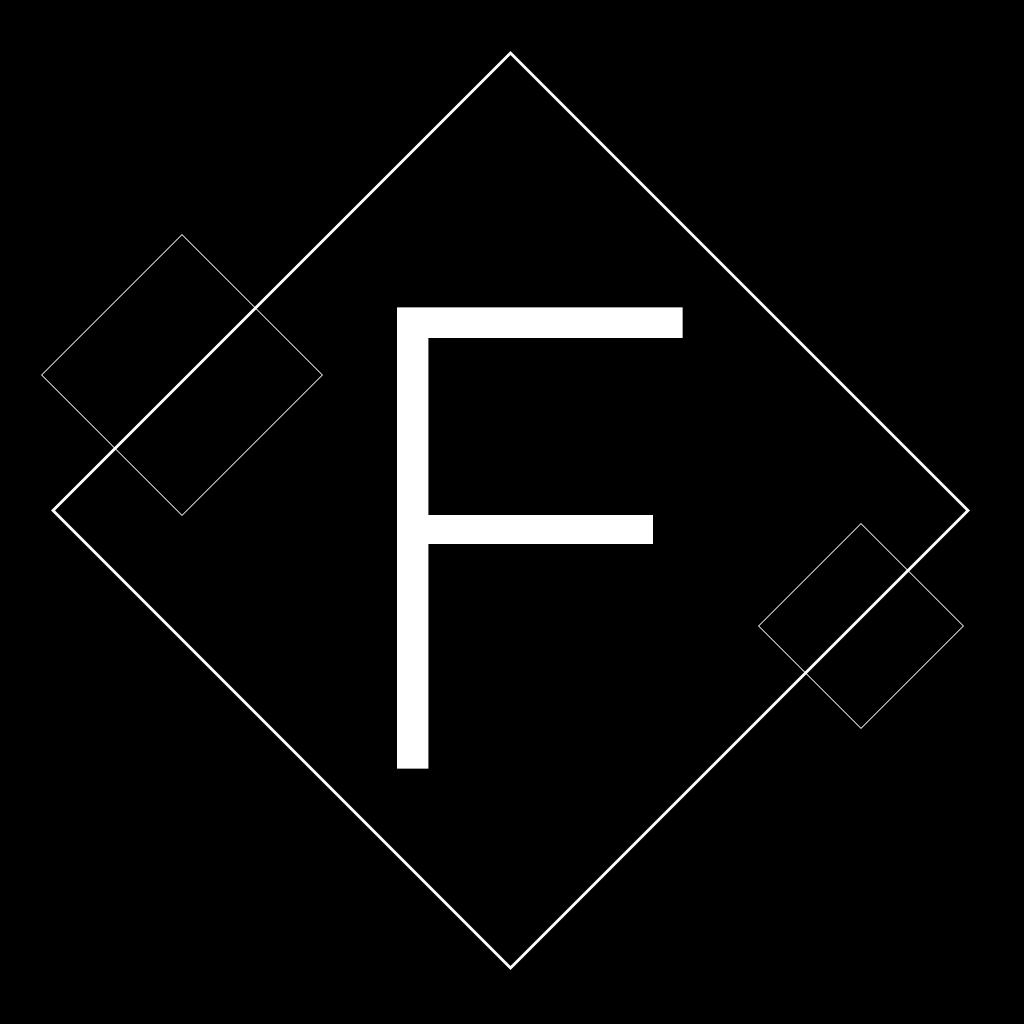
<style>
.page{position:relative;width:1024px;height:1024px;background:#000000}
.page>*{position:absolute;margin:0}
.t1{font:625.6px "ShreeDev0714";letter-spacing:-0.01em;color:#ffffff}
</style>
<div class="page">
<p class="t1" style="left:397px;top:307px;width:286px;height:462px">F</p>
</div>
